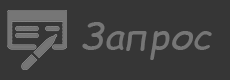
<style>
.page{position:relative;width:230px;height:80px;background:#363636}
.page>*{position:absolute;margin:0}
.t1{font:38.3px "ComicSansMS-Italic";letter-spacing:0.001em;color:#767676}
</style>
<div class="page">
<p class="t1" style="left:82px;top:22px;width:130px;height:38px">Запрос</p>
</div>
